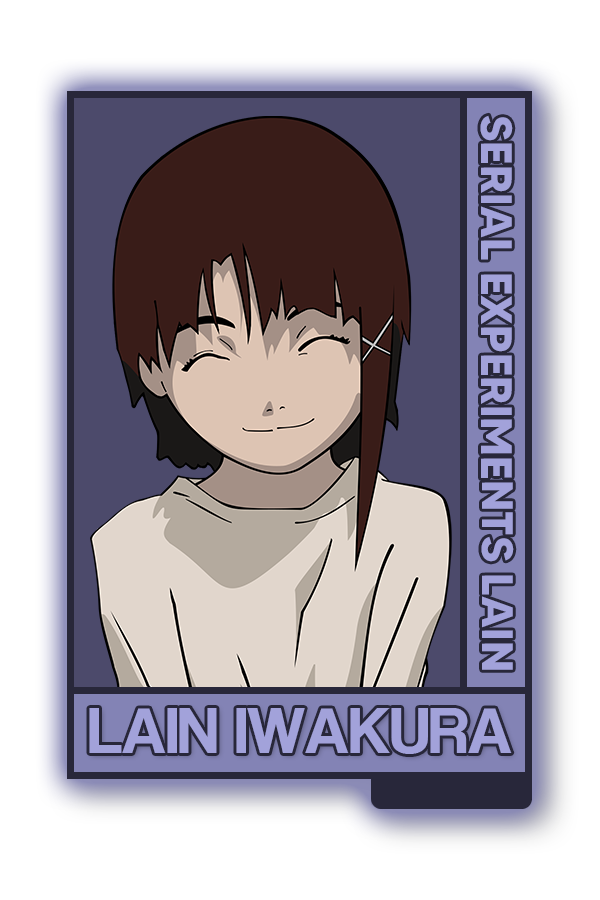
<style>
.page{position:relative;width:600px;height:900px;background:#ffffff}
.page>*{position:absolute;margin:0}
.t1{font:43.8px "MADETOMMY-Bold";color:#a2a2da}
.t2{font:67.7px "CoolveticaRg-Regular";color:#a2a2da}
</style>
<div class="page">
<p class="t1" style="left:480px;top:115px;width:34px;height:555px;rotate:90deg">SERIAL EXPERIMENTS LAIN</p>
<p class="t2" style="left:89px;top:708px;width:423px;height:46px">LAIN IWAKURA</p>
</div>
